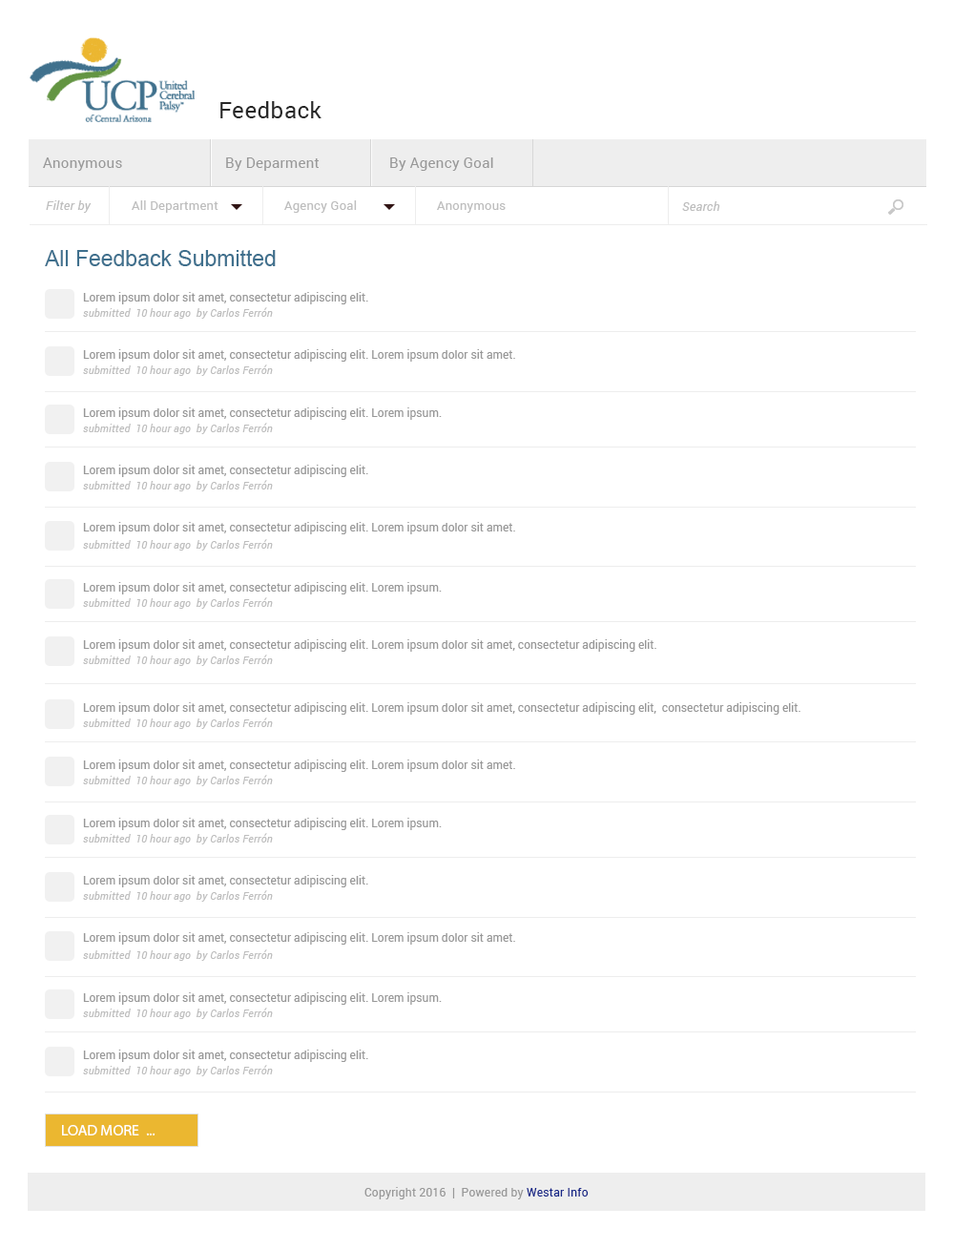
<style>
.page{position:relative;width:954px;height:1249px;background:#ffffff}
.page>*{position:absolute;margin:0}
.t1{font:22.9px "Roboto-Regular";letter-spacing:0.02em;color:#282828}
.t2{font:14.3px "Roboto-Regular";letter-spacing:0.02em;color:#989898}
.t3{font:12.4px "Roboto-Italic";letter-spacing:0.02em;color:#bebebe}
.t4{font:12.4px "Roboto-Regular";letter-spacing:0.02em;color:#bebebe}
.t5{font:22px "ArialMT";color:#40708d}
.t6{font:11.5px "Roboto-Regular";color:#989898}
.t7{font:10.5px "Roboto-Italic";letter-spacing:0.02em;color:#bebebe}
.t8{font:15.3px "MyriadPro-Regular";color:#ffffff;text-transform:uppercase}
.t9{font:11.5px "Roboto-Regular";letter-spacing:0.02em;color:#989898}
.t10{font:11.5px "Roboto-Regular";letter-spacing:0.02em;color:#172788}
</style>
<div class="page">
<p class="t1" style="left:220px;top:101px;width:102px;height:17px">Feedback</p>
<p class="t2" style="left:43px;top:157px;width:79px;height:14px">Anonymous</p>
<p class="t2" style="left:226px;top:157px;width:94px;height:14px">By Deparment</p>
<p class="t2" style="left:390px;top:157px;width:103px;height:14px">By Agency Goal</p>
<p class="t3" style="left:46px;top:200px;width:46px;height:13px">Filter by</p>
<p class="t4" style="left:132px;top:200px;width:87px;height:13px">All Department</p>
<p class="t4" style="left:284px;top:200px;width:73px;height:13px">Agency Goal</p>
<p class="t4" style="left:437px;top:201px;width:69px;height:12px">Anonymous</p>
<p class="t3" style="left:682px;top:201px;width:39px;height:10px">Search</p>
<p class="t5" style="left:45px;top:250px;width:231px;height:16px">All Feedback Submitted</p>
<p class="t6" style="left:83px;top:292px;width:285px;height:12px">Lorem ipsum dolor sit amet, consectetur adipiscing elit.</p>
<p class="t7" style="left:83px;top:307px;width:190px;height:12px">submitted  10 hour ago  by Carlos Ferrón</p>
<p class="t6" style="left:83px;top:349px;width:432px;height:13px">Lorem ipsum dolor sit amet, consectetur adipiscing elit. Lorem ipsum dolor sit amet.</p>
<p class="t7" style="left:83px;top:365px;width:190px;height:11px">submitted  10 hour ago  by Carlos Ferrón</p>
<p class="t6" style="left:83px;top:408px;width:359px;height:12px">Lorem ipsum dolor sit amet, consectetur adipiscing elit. Lorem ipsum.</p>
<p class="t7" style="left:83px;top:423px;width:190px;height:11px">submitted  10 hour ago  by Carlos Ferrón</p>
<p class="t6" style="left:83px;top:465px;width:285px;height:12px">Lorem ipsum dolor sit amet, consectetur adipiscing elit.</p>
<p class="t7" style="left:83px;top:480px;width:190px;height:12px">submitted  10 hour ago  by Carlos Ferrón</p>
<p class="t6" style="left:83px;top:522px;width:432px;height:12px">Lorem ipsum dolor sit amet, consectetur adipiscing elit. Lorem ipsum dolor sit amet.</p>
<p class="t7" style="left:83px;top:539px;width:190px;height:12px">submitted  10 hour ago  by Carlos Ferrón</p>
<p class="t6" style="left:83px;top:582px;width:359px;height:13px">Lorem ipsum dolor sit amet, consectetur adipiscing elit. Lorem ipsum.</p>
<p class="t7" style="left:83px;top:597px;width:190px;height:12px">submitted  10 hour ago  by Carlos Ferrón</p>
<p class="t6" style="left:83px;top:639px;width:574px;height:13px">Lorem ipsum dolor sit amet, consectetur adipiscing elit. Lorem ipsum dolor sit amet, consectetur adipiscing elit.</p>
<p class="t7" style="left:83px;top:655px;width:190px;height:11px">submitted  10 hour ago  by Carlos Ferrón</p>
<p class="t6" style="left:83px;top:702px;width:718px;height:13px">Lorem ipsum dolor sit amet, consectetur adipiscing elit. Lorem ipsum dolor sit amet, consectetur adipiscing elit,  consectetur adipiscing elit.</p>
<p class="t7" style="left:83px;top:718px;width:190px;height:11px">submitted  10 hour ago  by Carlos Ferrón</p>
<p class="t6" style="left:83px;top:760px;width:432px;height:12px">Lorem ipsum dolor sit amet, consectetur adipiscing elit. Lorem ipsum dolor sit amet.</p>
<p class="t7" style="left:83px;top:775px;width:190px;height:11px">submitted  10 hour ago  by Carlos Ferrón</p>
<p class="t6" style="left:83px;top:818px;width:359px;height:12px">Lorem ipsum dolor sit amet, consectetur adipiscing elit. Lorem ipsum.</p>
<p class="t7" style="left:83px;top:833px;width:190px;height:12px">submitted  10 hour ago  by Carlos Ferrón</p>
<p class="t6" style="left:83px;top:875px;width:285px;height:13px">Lorem ipsum dolor sit amet, consectetur adipiscing elit.</p>
<p class="t7" style="left:83px;top:890px;width:190px;height:12px">submitted  10 hour ago  by Carlos Ferrón</p>
<p class="t6" style="left:83px;top:932px;width:432px;height:13px">Lorem ipsum dolor sit amet, consectetur adipiscing elit. Lorem ipsum dolor sit amet.</p>
<p class="t7" style="left:83px;top:950px;width:190px;height:11px">submitted  10 hour ago  by Carlos Ferrón</p>
<p class="t6" style="left:83px;top:993px;width:359px;height:12px">Lorem ipsum dolor sit amet, consectetur adipiscing elit. Lorem ipsum.</p>
<p class="t7" style="left:83px;top:1008px;width:190px;height:11px">submitted  10 hour ago  by Carlos Ferrón</p>
<p class="t6" style="left:83px;top:1050px;width:285px;height:12px">Lorem ipsum dolor sit amet, consectetur adipiscing elit.</p>
<p class="t7" style="left:83px;top:1065px;width:190px;height:12px">submitted  10 hour ago  by Carlos Ferrón</p>
<p class="t8" style="left:62px;top:1125px;width:94px;height:11px">load more  ...</p>
<p class="t9" style="left:365px;top:1187px;width:224px;height:13px">Copyright 2016  |  Powered by <span class="t10">Westar Info</span></p>
</div>
